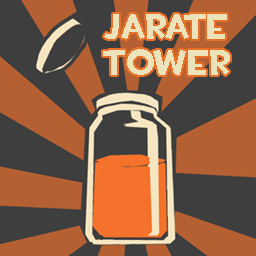
<style>
.page{position:relative;width:256px;height:256px;background:#3e3e3e}
.page>*{position:absolute;margin:0}
.t1{font:36px/36px "TF2Build";color:#ede3bb}
</style>
<div class="page">
<p class="t1" style="left:103px;top:14px;width:127px;height:61px;text-align:center">Jarate<br>Tower</p>
</div>
